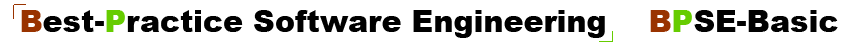
<style>
.page{position:relative;width:850px;height:42px;background:#ffffff}
.page>*{position:absolute;margin:0}
.t1{font:30px "Arial-Black";color:#000000}
.t2{font:30px "Arial-Black";color:#993300}
.t3{font:30px "Arial-Black";color:#66cc00}
.t4{font:30px "Arial-Black";color:#010101}
</style>
<div class="page">
<p class="t1" style="left:21px;top:10px;width:584px;height:28px"><span class="t2">B</span>est-<span class="t3">P</span>ractice Software Engineering</p>
<p class="t4" style="left:650px;top:10px;width:188px;height:22px"><span class="t2">B</span><span class="t3">P</span>SE-Basic</p>
</div>
